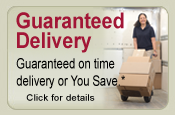
<style>
.page{position:relative;width:175px;height:115px}
.page>*{position:absolute;margin:0}
.t1{font:21.7px/19.9px "Arial-BoldMT";color:#a21636;scale:0.9 1}
.t2{font:14.4px "ArialMT";color:#000000;scale:0.78 1}
.t3{font:9px "ArialMT";color:#000000;scale:1.12 1}
</style>
<div class="page">
<p class="t1" style="left:16px;top:12px;width:108px;height:41px">Guaranteed<br>Delivery</p>
<p class="t2" style="left:16px;top:58px;width:109px;height:31px">Guaranteed on time<br>delivery or You Save.*</p>
<p class="t3" style="left:26px;top:94px;width:69px;height:7px">Click for details</p>
</div>
